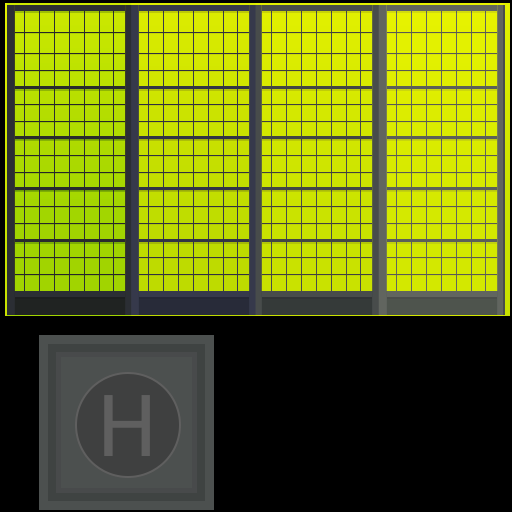
<style>
.page{position:relative;width:512px;height:512px;background:#000000}
.page>*{position:absolute;margin:0}
.t1{font:90.9px "MS-UIGothic";letter-spacing:-0.025em;color:#5f5f5f}
</style>
<div class="page">
<p class="t1" style="left:104px;top:395px;width:46px;height:61px">H</p>
</div>
